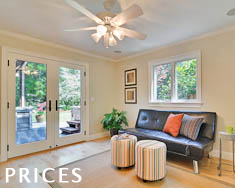
<style>
.page{position:relative;width:235px;height:188px}
.page>*{position:absolute;margin:0}
.t1{font:20px "LucidaSansUnicode";letter-spacing:-0.84em;color:#ffffff;font-weight:bold}
</style>
<div class="page">
<p class="t1" style="left:5px;top:168px;width:77px;height:15px">PRICES</p>
</div>
